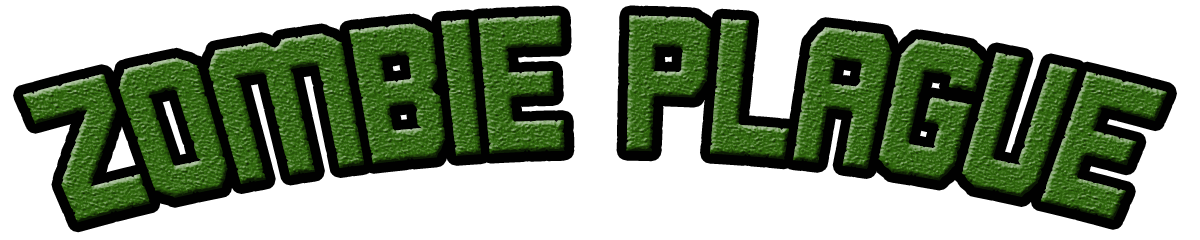
<style>
.page{position:relative;width:1200px;height:240px;background:#ffffff}
.page>*{position:absolute;margin:0}
.t1{font:125px "Rowdy-Space-Pirates"}
</style>
<div class="page">
<p class="t1" style="left:23px;top:15px;width:1144px;height:208px">Zombie Plague</p>
</div>
